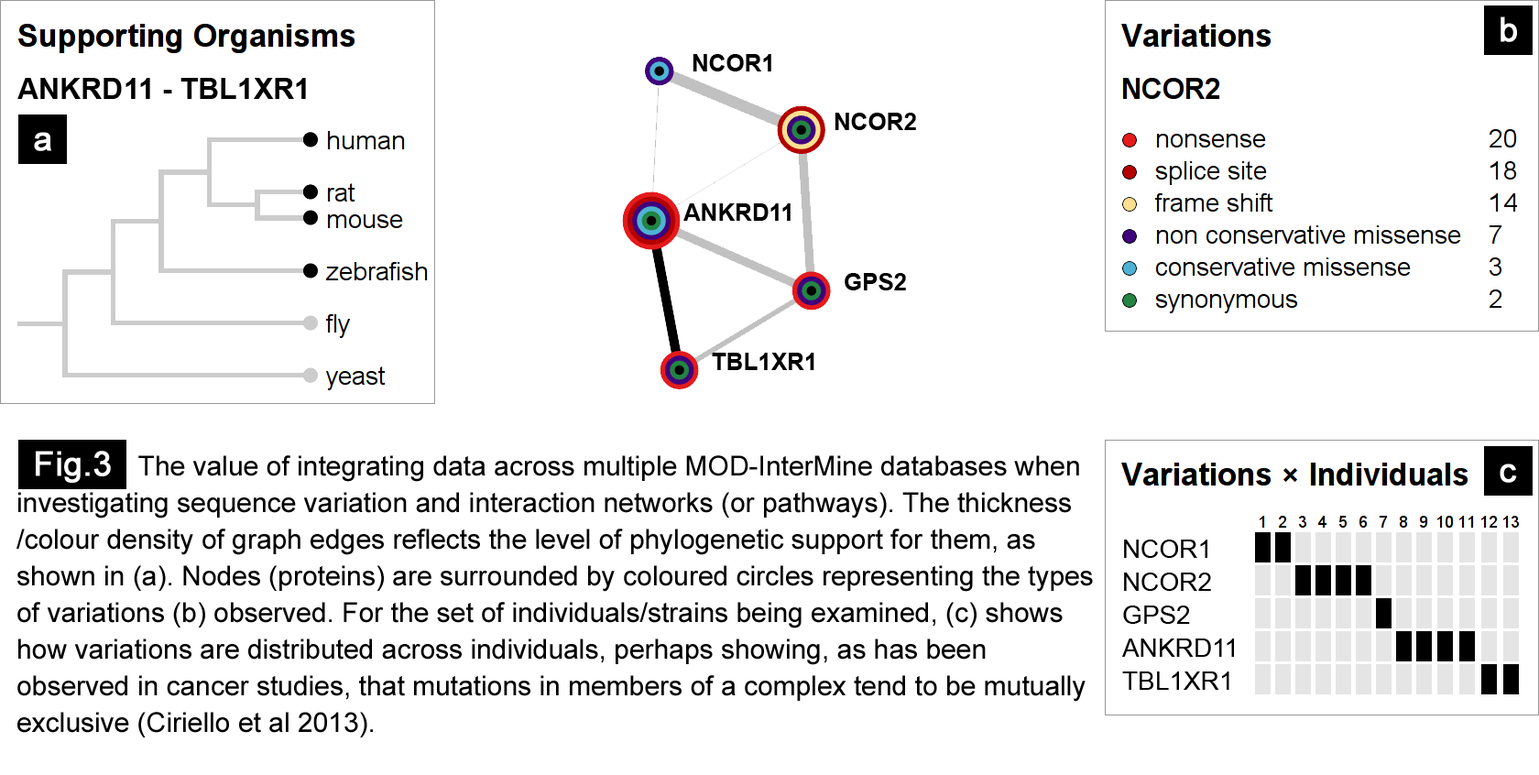
<style>
.page{position:relative;width:1539px;height:775px;background:#ffffff}
.page>*{position:absolute;margin:0}
.t1{font:33.8px "ArialMT";color:#ffffff;font-weight:bold}
.t2{font:23.8px "Arial-BoldMT";color:#000000;text-transform:uppercase}
.t3{font:29.3px "Arial-BoldMT";color:#000000;text-transform:uppercase}
.t4{font:27.5px/36.6px "ArialMT";color:#000000}
.t5{font:25.7px/33px "ArialMT";color:#000000;text-transform:uppercase}
</style>
<div class="page">
<p class="t1" style="left:1500px;top:16px;width:17px;height:26px">b</p>
<p class="t2" style="left:692px;top:54px;width:79px;height:17px">ncor1</p>
<p class="t3" style="left:17px;top:78px;width:289px;height:21px">ankrd11 - tbl1xr1</p>
<p class="t2" style="left:834px;top:113px;width:82px;height:17px">ncor2</p>
<p class="t1" style="left:34px;top:132px;width:17px;height:19px">a</p>
<p class="t2" style="left:683px;top:203px;width:107px;height:18px">ankrd11</p>
<p class="t2" style="left:845px;top:273px;width:61px;height:17px">gps2</p>
<p class="t2" style="left:712px;top:353px;width:102px;height:17px">tbl1xr1</p>
<p class="t4" style="left:16px;top:455px;width:1077px;height:282px">The value of integrating data across multiple MOD-InterMine databases when<br>investigating sequence variation and interaction networks (or pathways). The thickness<br>/colour density of graph edges reflects the level of phylogenetic support for them, as<br>shown in (a). Nodes (proteins) are surrounded by coloured circles representing the types<br>of variations (b) observed. For the set of individuals/strains being examined, (c) shows<br>how variations are distributed across individuals, perhaps showing, as has been<br>observed in cancer studies, that mutations in members of a complex tend to be mutually<br>exclusive (Ciriello et al 2013).</p>
<p class="t1" style="left:36px;top:451px;width:75px;height:32px">Fig.3</p>
<p class="t1" style="left:1499px;top:463px;width:18px;height:20px">c</p>
<p class="t5" style="left:1122px;top:540px;width:112px;height:150px">ncor1<br>ncor2<br>gps2<br>ankrd11<br>tbl1xr1</p>
</div>
